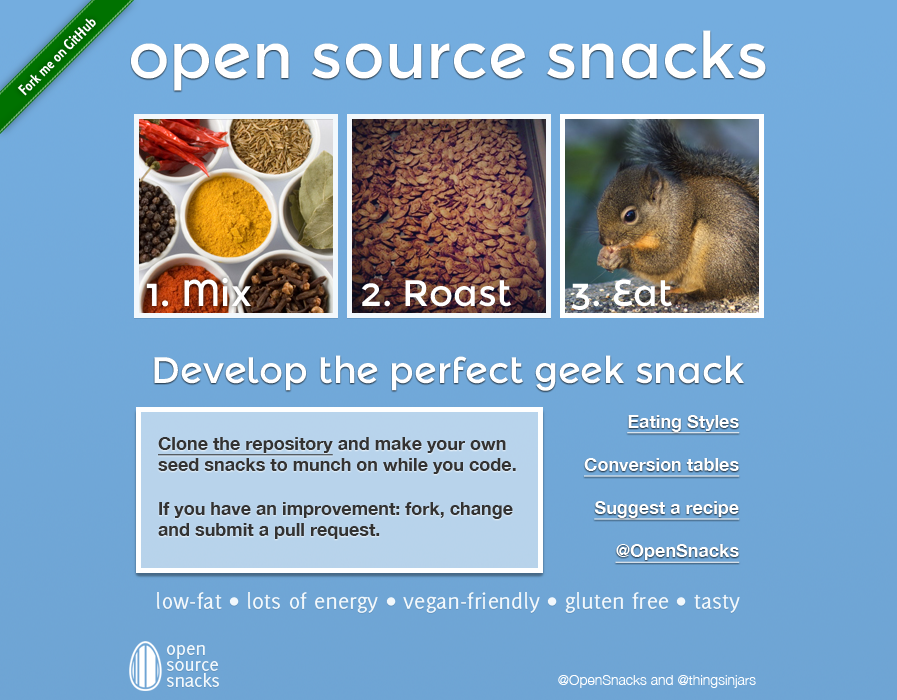
<style>
.page{position:relative;width:897px;height:700px}
.page>*{position:absolute;margin:0}
.t1{font:64px "MontserratAlternates-Regular";color:#ffffff}
.t2{font:37px "MontserratAlternates-Regular";color:#ffffff}
.t3{font:18px "HelveticaNeue-Bold";color:#ffffff;text-decoration:underline}
.t4{font:18px "HelveticaNeue-Bold";color:#333333}
.t5{font:18px "HelveticaNeue-Bold";color:#333333;text-decoration:underline}
.t6{font:24px "Delicious-Roman";color:#f2f8fc}
.t7{font:20px/16px "Delicious-Roman";color:#f2f8fc}
.t8{font:14px "HelveticaNeue-Light";color:#ffffff}
</style>
<div class="page">
<p class="t1" style="left:131px;top:30px;width:635px;height:61px">open source snacks</p>
<p class="t2" style="left:147px;top:278px;width:104px;height:29px">1. Mix</p>
<p class="t2" style="left:361px;top:280px;width:150px;height:27px">2. Roast</p>
<p class="t2" style="left:571px;top:279px;width:101px;height:31px">3. Eat</p>
<p class="t2" style="left:154px;top:355px;width:590px;height:36px">Develop the perfect geek snack</p>
<p class="t3" style="left:584px;top:415px;width:156px;height:148px;text-align:right">Eating Styles<br><br>Conversion tables<br><br>Suggest a recipe<br><br>@OpenSnacks</p>
<p class="t4" style="left:158px;top:437px;width:358px;height:102px"><span class="t5">Clone the repository</span> and make your own seed snacks to munch on while you code. <br><br>If you have an improvement: fork, change and submit a pull request.</p>
<p class="t6" style="left:157px;top:592px;width:583px;height:21px">low-fat • lots of energy • vegan-friendly • gluten free • tasty</p>
<p class="t7" style="left:167px;top:645px;width:52px;height:42px">open<br>source<br>snacks</p>
<p class="t8" style="left:558px;top:675px;width:198px;height:13px">@OpenSnacks and @thingsinjars</p>
</div>
